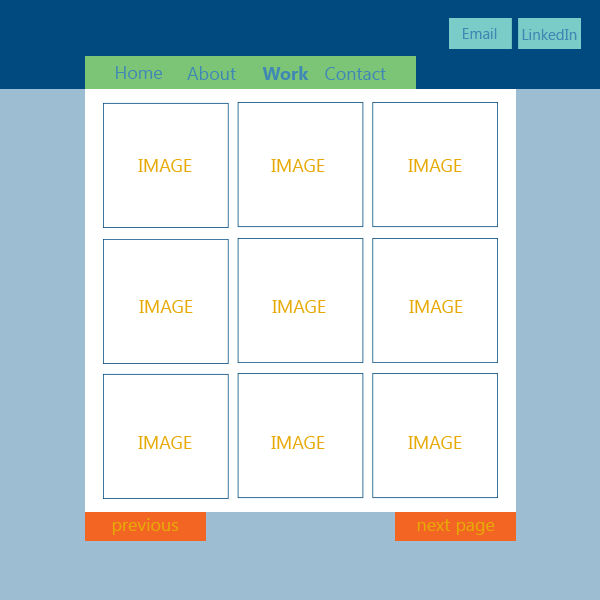
<style>
.page{position:relative;width:600px;height:600px;background:#ffffff}
.page>*{position:absolute;margin:0}
.t1{font:15.1px "Gadugi";color:#4088b4}
.t2{font:18px "Gadugi";color:#4088b4}
.t3{font:18px "Gadugi-Bold";color:#4088b4}
.t4{font:18px "Gadugi";color:#e6a906}
</style>
<div class="page">
<p class="t1" style="left:463px;top:28px;width:34px;height:11px">Email</p>
<p class="t1" style="left:522px;top:29px;width:55px;height:11px">LinkedIn</p>
<p class="t2" style="left:116px;top:66px;width:46px;height:13px">Home</p>
<p class="t2" style="left:187px;top:66px;width:49px;height:14px">About</p>
<p class="t3" style="left:262px;top:66px;width:47px;height:14px">Work</p>
<p class="t2" style="left:325px;top:67px;width:61px;height:13px">Contact</p>
<p class="t4" style="left:112px;top:518px;width:67px;height:17px">previous</p>
<p class="t4" style="left:417px;top:519px;width:78px;height:16px">next page</p>
</div>
